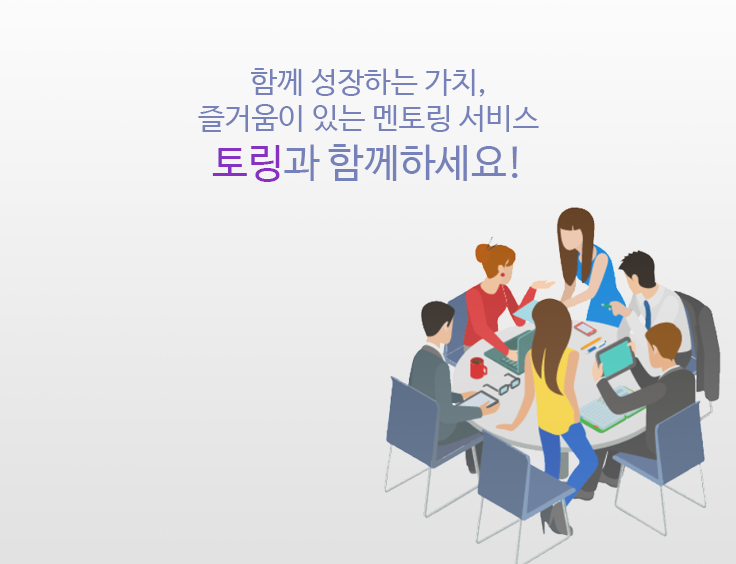
<style>
.page{position:relative;width:736px;height:564px}
.page>*{position:absolute;margin:0}
.t1{font:30px "NanumBarunGothic";color:#7681b9}
.t2{font:40px "NanumBarunGothic";color:#8631c2}
.t3{font:40px "NanumBarunGothic";color:#7681b9}
</style>
<div class="page">
<p class="t1" style="left:198px;top:68px;width:341px;height:114px;text-align:center">함께 성장하는 가치,<br>즐거움이 있는 멘토링 서비스<br><span class="t2">토링</span><span class="t3">과 함께하세요!</span></p>
</div>
